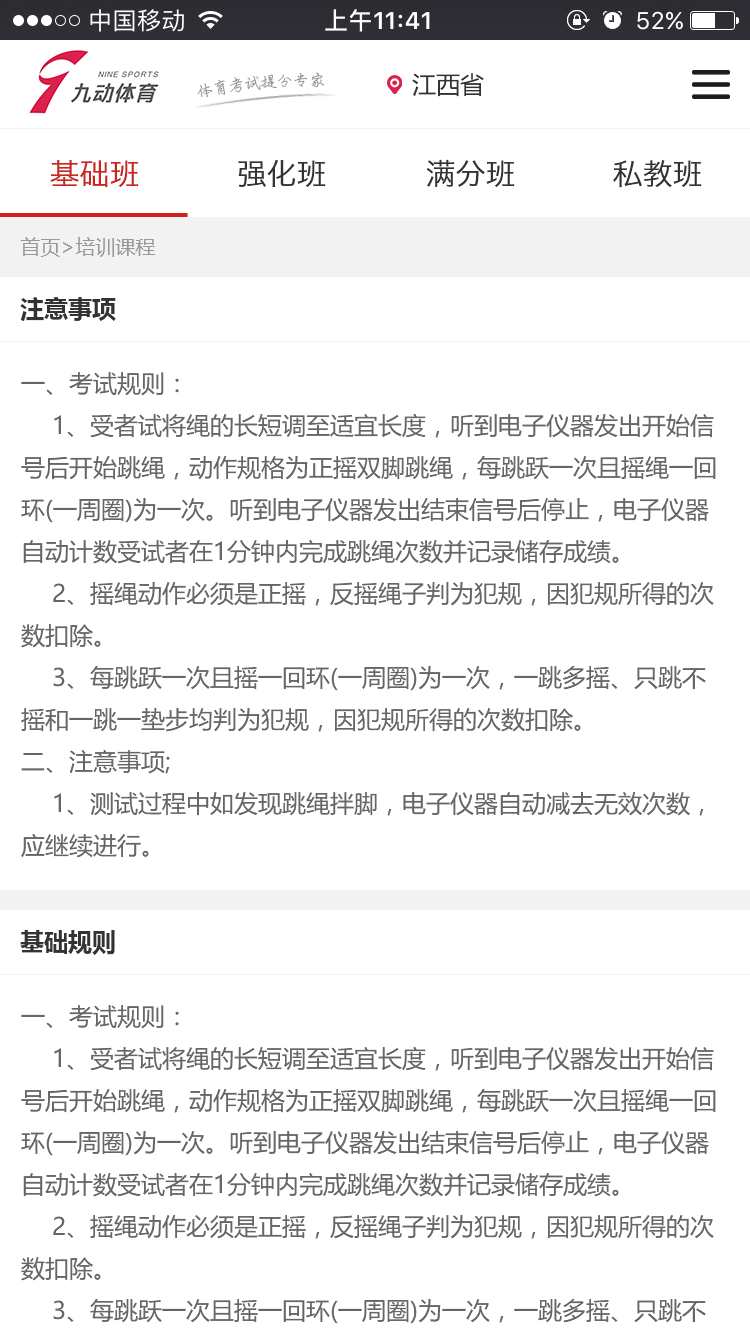
<style>
.page{position:relative;width:750px;height:1334px;background:#ffffff}
.page>*{position:absolute;margin:0}
.t1{font:16px "PensinkaiEG-Medium-GB";color:#8e8e8e}
.t2{font:24px "MicrosoftYaHei";color:#333333}
.t3{font:30px "HiraginoSansGB-W3";color:#cb241e}
.t4{font:30px "HiraginoSansGB-W3";color:#333333}
.t5{font:20px "MicrosoftYaHei";color:#989898}
.t6{font:24px "MicrosoftYaHei-Bold";color:#333333}
.t7{font:24px "MicrosoftYaHei";color:#666666}
</style>
<div class="page">
<p class="t1" style="left:197px;top:72px;width:127px;height:25px;rotate:4deg">体育考试提分专家</p>
<p class="t2" style="left:412px;top:73px;width:72px;height:24px">江西省</p>
<p class="t3" style="left:50px;top:160px;width:89px;height:27px">基础班</p>
<p class="t4" style="left:238px;top:159px;width:88px;height:28px">强化班</p>
<p class="t4" style="left:426px;top:159px;width:89px;height:28px">满分班</p>
<p class="t4" style="left:613px;top:160px;width:89px;height:28px">私教班</p>
<p class="t5" style="left:20px;top:237px;width:136px;height:20px">首页&gt;培训课程</p>
<p class="t6" style="left:20px;top:297px;width:96px;height:24px">注意事项</p>
<p class="t7" style="left:21px;top:372px;width:695px;height:486px">一、考试规则：<br>　 1、受者试将绳的长短调至适宜长度，听到电子仪器发出开始信号后开始跳绳，动作规格为正摇双脚跳绳，每跳跃一次且摇绳一回环(一周圈)为一次。听到电子仪器发出结束信号后停止，电子仪器自动计数受试者在1分钟内完成跳绳次数并记录储存成绩。<br>　 2、摇绳动作必须是正摇，反摇绳子判为犯规，因犯规所得的次数扣除。<br>　 3、每跳跃一次且摇一回环(一周圈)为一次，一跳多摇、只跳不摇和一跳一垫步均判为犯规，因犯规所得的次数扣除。<br>二、注意事项;<br>　 1、测试过程中如发现跳绳拌脚，电子仪器自动减去无效次数，应继续进行。<br>　 2、测试过程中，绳子断坏可以补测。<br>　 3、测试绳子允许使用自备或考场准备的绳子。<br>三、场地器材要求：电子测试板要放在平坦地面、应备有跳绳若干条。</p>
<p class="t6" style="left:20px;top:930px;width:95px;height:25px">基础规则</p>
</div>
